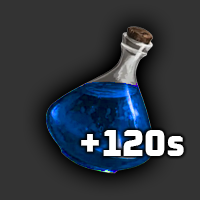
<style>
.page{position:relative;width:200px;height:200px;background:#333333}
.page>*{position:absolute;margin:0}
.t1{font:37.5px "Oxanium-ExtraBold";color:#ffffff}
</style>
<div class="page">
<p class="t1" style="left:81px;top:130px;width:103px;height:26px">+120s</p>
</div>
